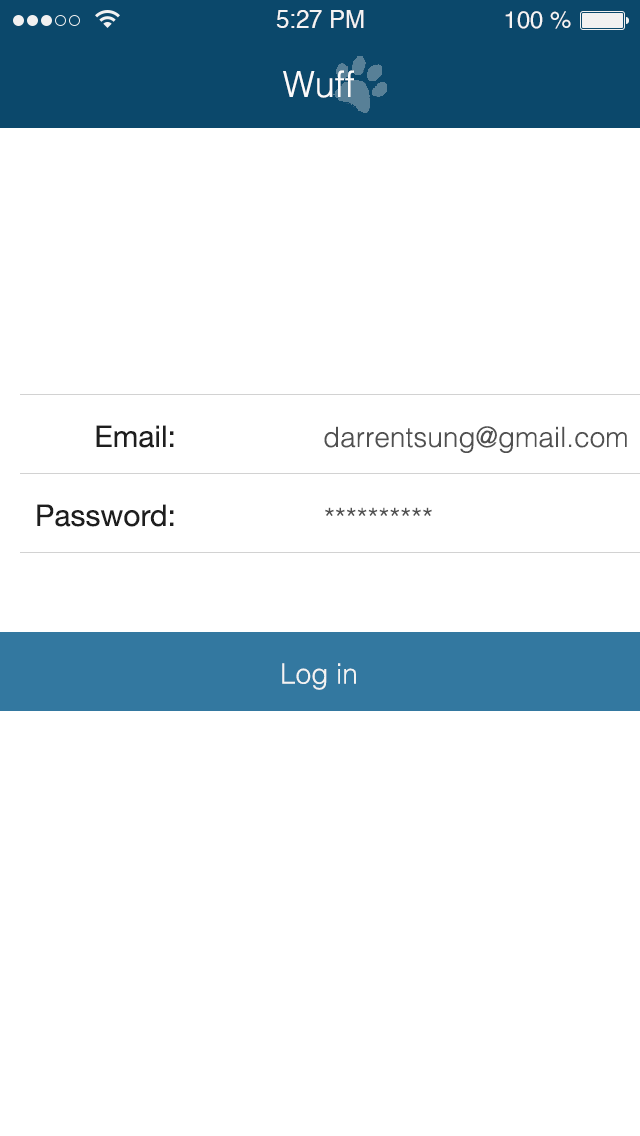
<style>
.page{position:relative;width:640px;height:1136px;background:#ffffff}
.page>*{position:absolute;margin:0}
.t1{font:24px "Helvetica";color:#f5f3f3}
.t2{font:24px "Helvetica";color:#f5f5f5}
.t3{font:36px "Helvetica-Light";color:#fbfbfb}
.t4{font:30px "HelveticaNeue";color:#1e1e1e}
.t5{font:28px "Helvetica-Light";color:#505050}
.t6{font:28px "Helvetica-Light";color:#f4f3f3}
</style>
<div class="page">
<p class="t1" style="left:276px;top:10px;width:88px;height:18px">5:27 PM</p>
<p class="t2" style="left:505px;top:11px;width:66px;height:18px">100 %</p>
<p class="t3" style="left:283px;top:70px;width:71px;height:28px">Wuff</p>
<p class="t4" style="left:96px;top:425px;width:78px;height:23px">Email:</p>
<p class="t5" style="left:324px;top:426px;width:303px;height:27px">darrentsung@gmail.com</p>
<p class="t4" style="left:37px;top:504px;width:137px;height:23px">Password:</p>
<p class="t5" style="left:325px;top:507px;width:107px;height:9px">**********</p>
<p class="t6" style="left:282px;top:663px;width:74px;height:27px">Log in</p>
</div>
